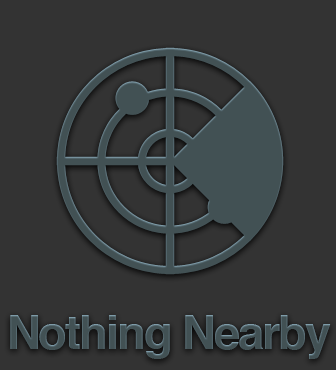
<style>
.page{position:relative;width:336px;height:370px;background:#333333}
.page>*{position:absolute;margin:0}
.t1{font:46.9px "Helvetica-Bold";letter-spacing:-0.04em;color:#425154}
</style>
<div class="page">
<p class="t1" style="left:10px;top:315px;width:321px;height:44px">Nothing Nearby</p>
</div>
